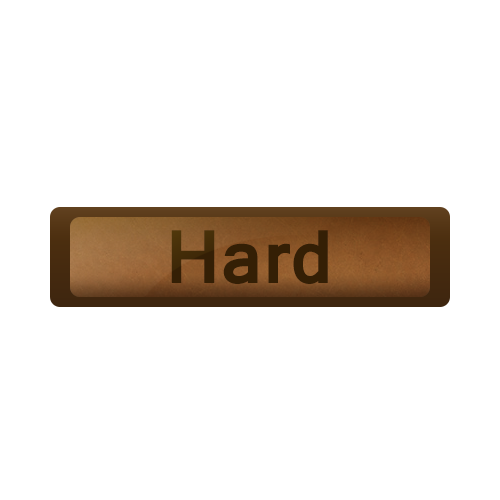
<style>
.page{position:relative;width:500px;height:500px;background:#ffffff}
.page>*{position:absolute;margin:0}
.t1{font:82px "Vrinda-Bold";color:#341f05}
</style>
<div class="page">
<p class="t1" style="left:171px;top:230px;width:157px;height:54px">Hard</p>
</div>
